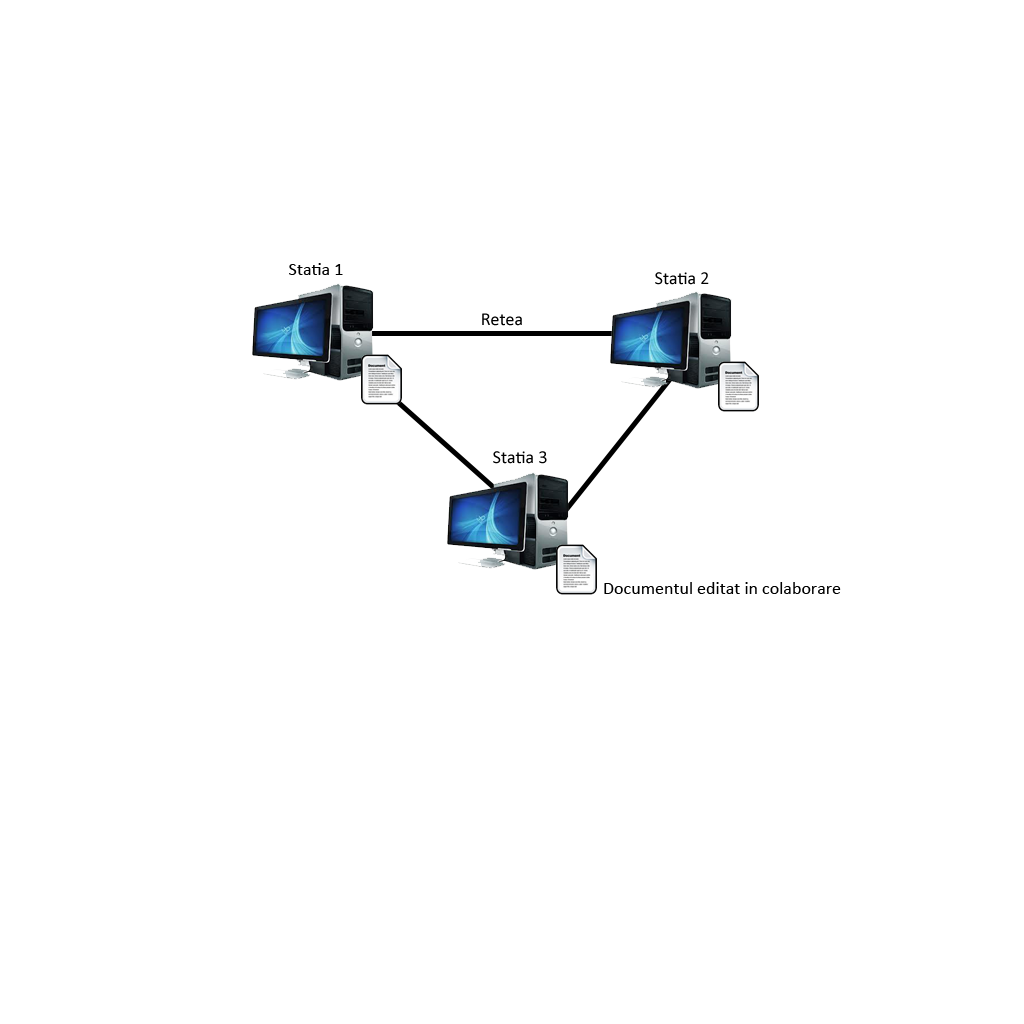
<style>
.page{position:relative;width:1024px;height:1024px;background:#ffffff}
.page>*{position:absolute;margin:0}
.t1{font:18px "Calibri";color:#000000}
</style>
<div class="page">
<p class="t1" style="left:289px;top:263px;width:54px;height:12px">Statia 1</p>
<p class="t1" style="left:655px;top:272px;width:54px;height:13px">Statia 2</p>
<p class="t1" style="left:482px;top:313px;width:40px;height:13px">Retea</p>
<p class="t1" style="left:493px;top:451px;width:54px;height:13px">Statia 3</p>
<p class="t1" style="left:604px;top:582px;width:237px;height:12px">Documentul editat in colaborare</p>
</div>
